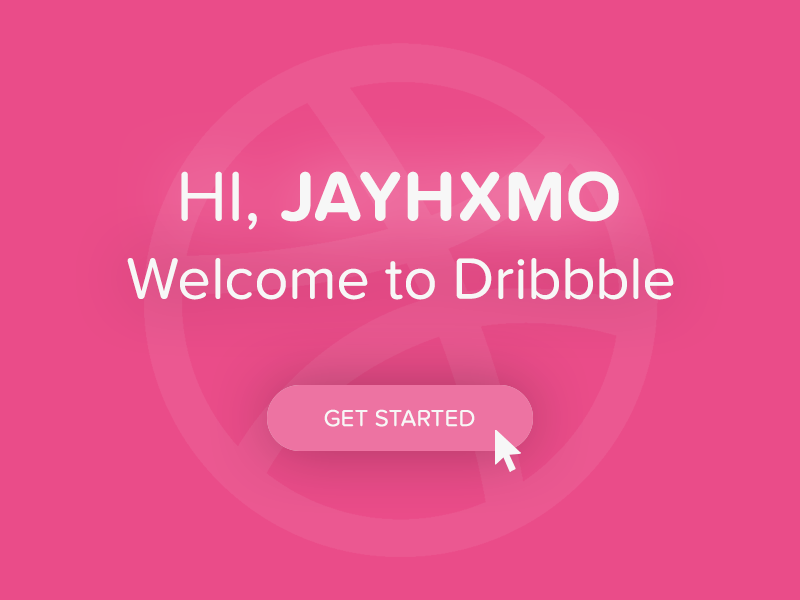
<style>
.page{position:relative;width:800px;height:600px;background:#ea4c89}
.page>*{position:absolute;margin:0}
.t1{font:72px "ProximaNovaSoft-Bold";color:#f7f7f7}
.t2{font:72px "ProximaNovaSoft-Regular";color:#f7f7f7}
.t3{font:60px "ProximaNovaSoft-Regular";color:#f7f7f7}
.t4{font:24px "ProximaNovaSoft-Regular";color:#f7f7f7}
</style>
<div class="page">
<p class="t1" style="left:181px;top:171px;width:438px;height:59px"><span class="t2">HI, </span>JAYHXMO</p>
<p class="t3" style="left:127px;top:258px;width:547px;height:42px">Welcome to Dribbble</p>
<p class="t4" style="left:324px;top:409px;width:151px;height:18px">GET STARTED</p>
</div>
